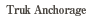
<style>
.page{position:relative;width:91px;height:19px;background:#ffffff}
.page>*{position:absolute;margin:0}
.t1{font:12px "RyuminPro-ExBold";letter-spacing:-0.04em;color:#4c4843;scale:0.9 1}
</style>
<div class="page">
<p class="t1" style="left:6px;top:5px;width:80px;height:11px">Truk Anchorage</p>
</div>
